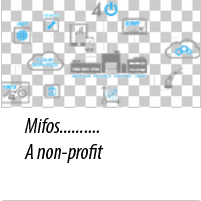
<style>
.page{position:relative;width:201px;height:201px;background:#ffffff}
.page>*{position:absolute;margin:0}
.t1{font:21.3px "MyriadPro-CondIt";color:#000000}
</style>
<div class="page">
<p class="t1" style="left:24px;top:118px;width:80px;height:45px">Mifos..........<br>A non-profit</p>
</div>
